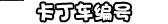
<style>
.page{position:relative;width:168px;height:24px;background:#ffffff}
.page>*{position:absolute;margin:0}
.t1{font:19px "DFPHaiBaoW12";letter-spacing:0.01em;color:#ffffff}
</style>
<div class="page">
<p class="t1" style="left:37px;top:3px;width:94px;height:18px">卡丁车编号</p>
</div>
